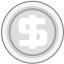
<style>
.page{position:relative;width:64px;height:64px;background:#ffffff}
.page>*{position:absolute;margin:0}
.t1{font:40.5px "A*SPACEHEAVYDemo";color:#ffffff}
</style>
<div class="page">
<p class="t1" style="left:18px;top:15px;width:30px;height:34px">$</p>
</div>
